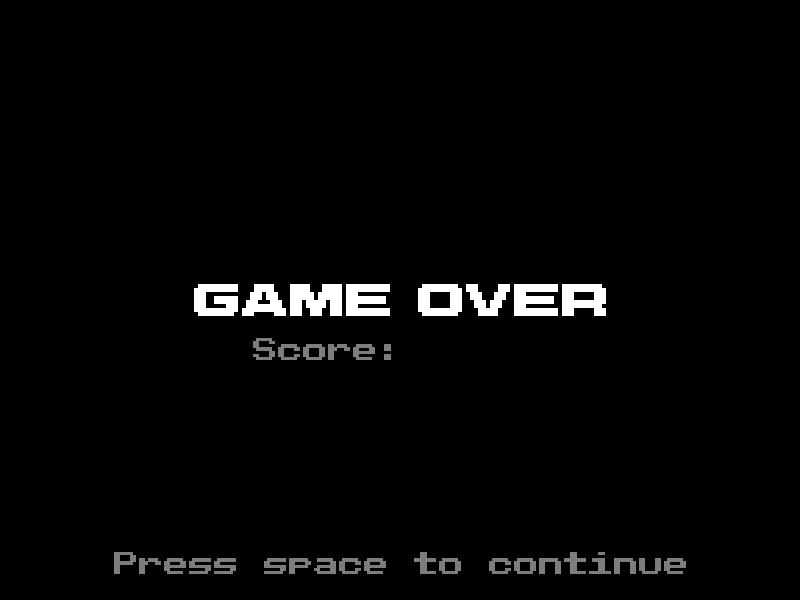
<style>
.page{position:relative;width:800px;height:600px;background:#000000}
.page>*{position:absolute;margin:0}
.t1{font:32px "M42_FLIGHT-721";color:#ffffff}
.t2{font:25px "PublicPixel";color:#7d7d7d}
</style>
<div class="page">
<p class="t1" style="left:194px;top:284px;width:412px;height:32px">GAME OVER</p>
<p class="t2" style="left:253px;top:338px;width:138px;height:22px">Score:</p>
<p class="t2" style="left:114px;top:552px;width:572px;height:22px">Press space to continue</p>
</div>
